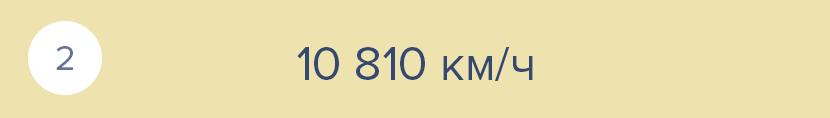
<style>
.page{position:relative;width:830px;height:118px;background:#eee2af}
.page>*{position:absolute;margin:0}
.t1{font:36px "ProximaNova-Regular";color:#647493}
.t2{font:48px "ProximaNova-Regular";color:#344870}
</style>
<div class="page">
<p class="t1" style="left:56px;top:46px;width:17px;height:24px">2</p>
<p class="t2" style="left:297px;top:47px;width:236px;height:34px">10 810 км/ч</p>
</div>
